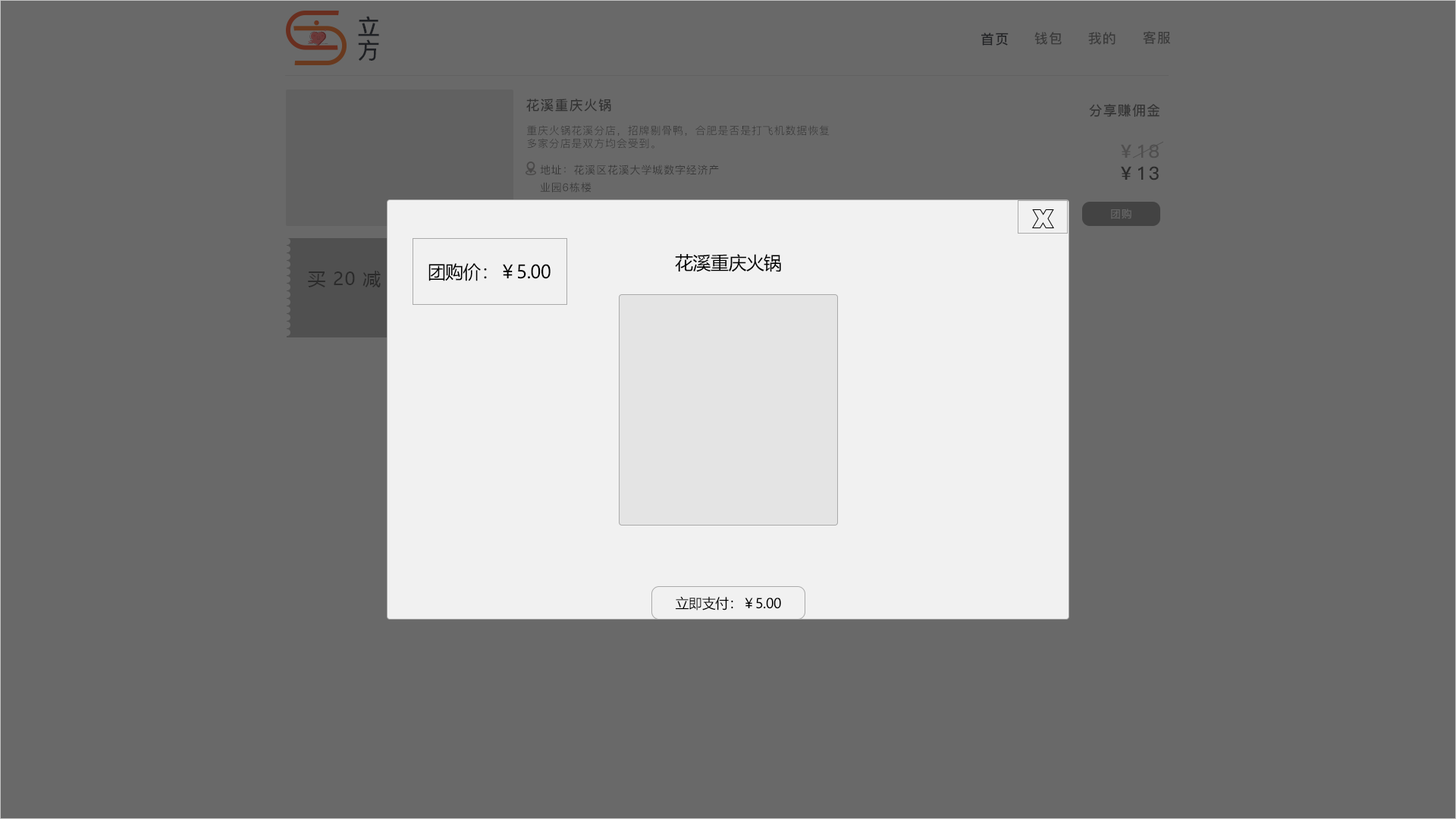
<style>
.page{position:relative;width:1456px;height:819px;background:#696969}
.page>*{position:absolute;margin:0}
.t1{font:22.7px "PingFang-SC-Bold";letter-spacing:0.06em;color:#1e2024}
.t2{font:13.6px "PingFang-SC-Bold";letter-spacing:0.06em;color:#0f131e}
.t3{font:13.6px "PingFang-SC-Bold";letter-spacing:0.06em;color:#3b3b3b}
.t4{font:13.6px "PingFang-SC-Bold";letter-spacing:0.06em;color:#474747}
.t5{font:13.6px "PingFang-SC-Bold";letter-spacing:0.06em;color:#4c4c4c}
.t6{font:10.6px "PingFang-SC-Regular";letter-spacing:0.06em;color:#474747}
.t7{font:18.2px "PingFang-SC-Bold";letter-spacing:0.06em;color:#504f4f}
.t8{font:10.6px/17.4px "PingFang-SC-Medium";letter-spacing:0.06em;color:#393939}
.t9{font:18.2px "PingFang-SC-Bold";letter-spacing:0.06em;color:#313131}
.t10{font:10.6px "PingFang-SC-Bold";letter-spacing:0.06em;color:#666666}
.t11{font:18.2px "MicrosoftYaHei";letter-spacing:-0.024em;color:#000000}
.t12{font:13.6px "MicrosoftYaHei";letter-spacing:-0.024em;color:#000000}
</style>
<div class="page">
<p class="t1" style="left:358px;top:16px;width:21px;height:45px">立方</p>
<p class="t2" style="left:981px;top:33px;width:28px;height:12px">首页</p>
<p class="t3" style="left:1034px;top:32px;width:28px;height:13px">钱包</p>
<p class="t3" style="left:1088px;top:32px;width:27px;height:13px">我的</p>
<p class="t3" style="left:1143px;top:31px;width:28px;height:13px">客服</p>
<p class="t4" style="left:526px;top:99px;width:85px;height:12px">花溪重庆火锅</p>
<p class="t5" style="left:1089px;top:104px;width:71px;height:13px">分享赚佣金</p>
<p class="t6" style="left:527px;top:125px;width:303px;height:24px">重庆火锅花溪分店，招牌剔骨鸭，合肥是否是打飞机数据恢复<br>多家分店是双方均会受到。</p>
<p class="t7" style="left:1121px;top:144px;width:38px;height:14px">￥18</p>
<p class="t8" style="left:540px;top:165px;width:179px;height:28px">地址：花溪区花溪大学城数字经济产<br>业园6栋楼</p>
<p class="t9" style="left:1121px;top:166px;width:38px;height:14px">￥13</p>
<p class="t10" style="left:1111px;top:209px;width:20px;height:10px">团购</p>
<p class="t11" style="left:675px;top:254px;width:106px;height:18px">花溪重庆火锅</p>
<p class="t11" style="left:428px;top:263px;width:123px;height:18px">团购价：￥5.00</p>
<p class="t12" style="left:676px;top:596px;width:105px;height:14px">立即支付：￥5.00</p>
</div>
